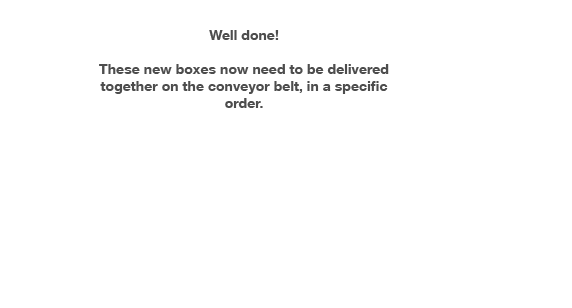
<style>
.page{position:relative;width:572px;height:308px;background:#ffffff}
.page>*{position:absolute;margin:0}
.t1{font:14.1px "HelveticaNeueLTCom-Bd";color:#4d4d4d}
</style>
<div class="page">
<p class="t1" style="left:99px;top:30px;width:290px;height:78px;text-align:center">Well done!<br><br>These new boxes now need to be delivered together on the conveyor belt, in a specific order.</p>
</div>
